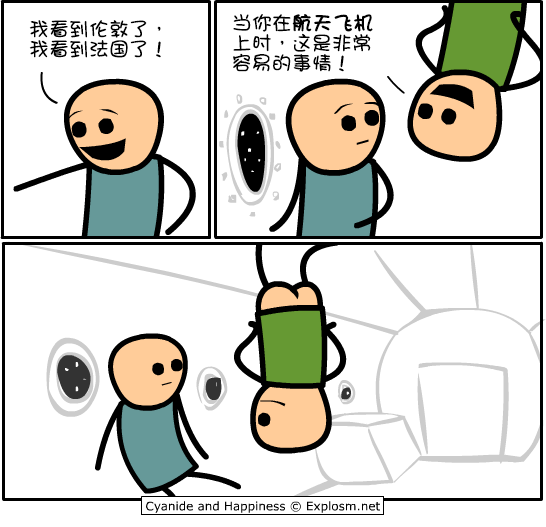
<style>
.page{position:relative;width:546px;height:527px;background:#ffffff}
.page>*{position:absolute;margin:0}
.t1{font:20px/20px "DFGirl";color:#000000}
.t2{font:20px/20px "DFGirl";color:#000000;font-weight:bold}
</style>
<div class="page">
<p class="t1" style="left:233px;top:14px;width:140px;height:58px">当你在<span class="t2">航天飞机<br></span>上时，这是非常<br>容易的事情！</p>
<p class="t1" style="left:29px;top:20px;width:132px;height:38px">我看到伦敦了，<br>我看到法国了！</p>
</div>
